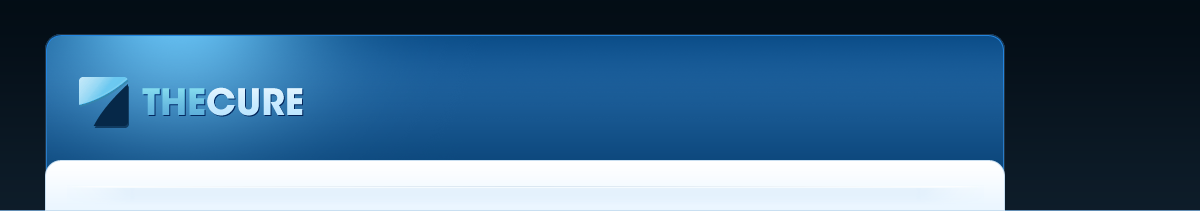
<style>
.page{position:relative;width:1200px;height:211px}
.page>*{position:absolute;margin:0}
.t1{font:36px "ITCAvantGardeStd-Bold";text-transform:uppercase}
</style>
<div class="page">
<p class="t1" style="left:142px;top:87px;width:161px;height:29px">TheCURE</p>
</div>
